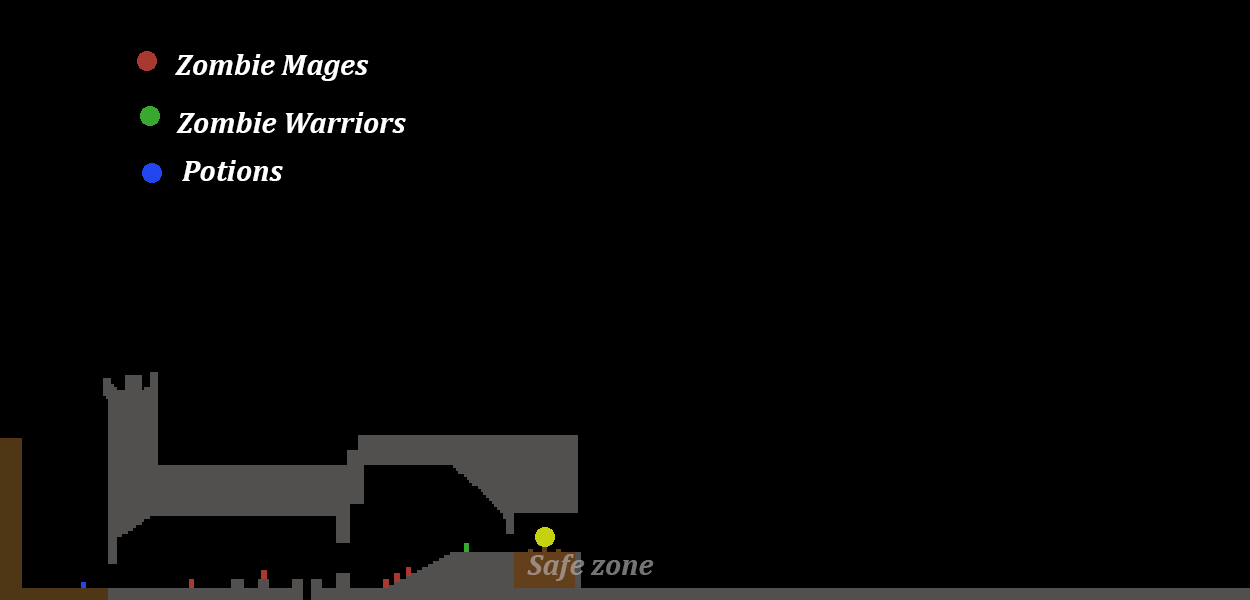
<style>
.page{position:relative;width:1250px;height:600px;background:#000000}
.page>*{position:absolute;margin:0}
.t1{font:30px "Cambria-BoldItalic";color:#ffffff}
.t2{font:30px "Cambria-BoldItalic"}
</style>
<div class="page">
<p class="t1" style="left:175px;top:54px;width:194px;height:27px">Zombie Mages</p>
<p class="t1" style="left:176px;top:112px;width:230px;height:21px">Zombie Warriors</p>
<p class="t1" style="left:182px;top:160px;width:101px;height:21px">Potions</p>
<p class="t2" style="left:527px;top:554px;width:127px;height:27px">Safe zone</p>
</div>
